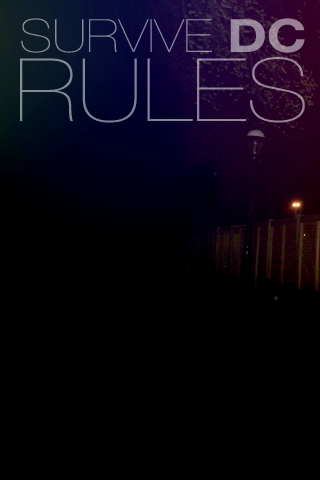
<style>
.page{position:relative;width:320px;height:480px;background:#000000}
.page>*{position:absolute;margin:0}
.t1{font:45.5px "HelveticaNeue-UltraLight";color:#97859a;scale:1.18 1}
.t2{font:45.5px "HelveticaNeue-Bold";color:#97859a;scale:1.18 1}
.t3{font:87.3px "HelveticaNeue-UltraLight";color:#858295;scale:1.18 1}
</style>
<div class="page">
<p class="t1" style="left:21px;top:18px;width:284px;height:35px">SURVIVE <span class="t2">DC</span></p>
<p class="t3" style="left:20px;top:57px;width:285px;height:66px">RULES</p>
</div>
